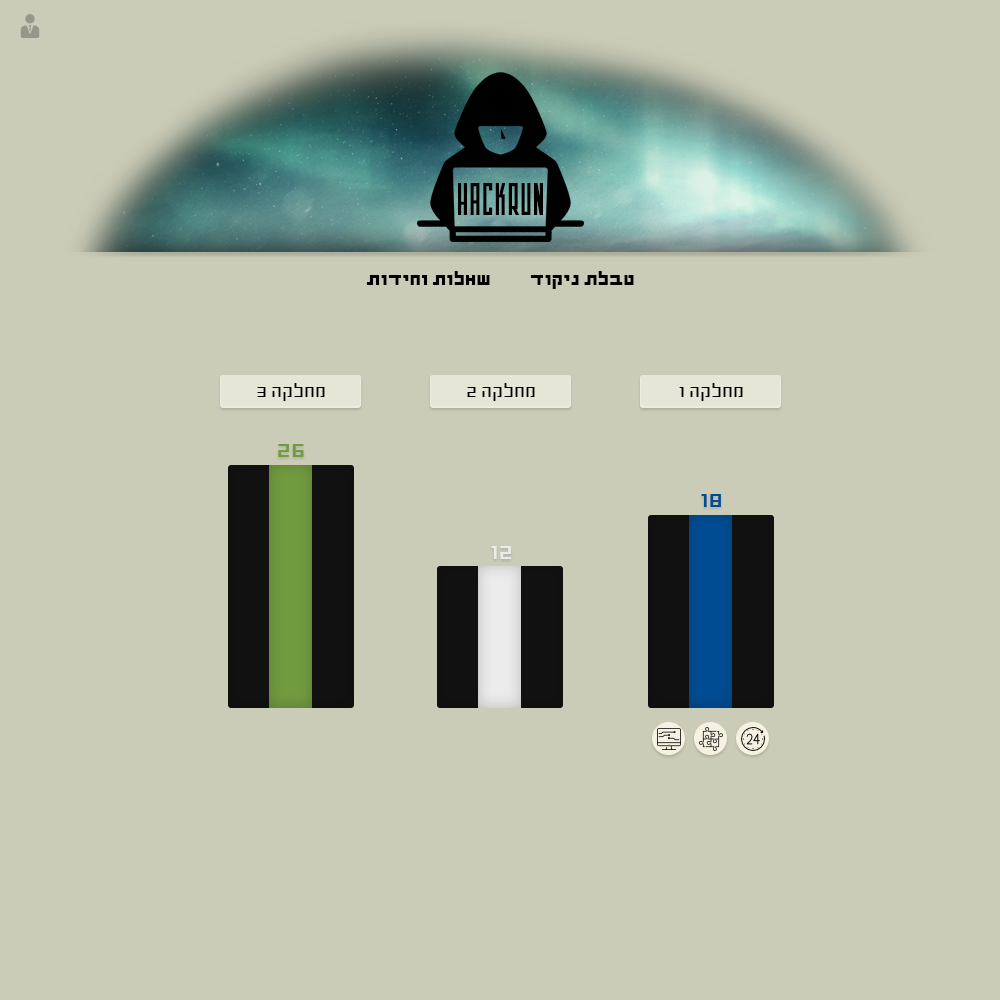
<style>
.page{position:relative;width:1000px;height:1000px;background:#cbccb7}
.page>*{position:absolute;margin:0}
.t1{font:43.9px "ALTROGUE";color:#000000}
.t2{font:20px "ShimshonBold";letter-spacing:-0.03em;color:#000000}
.t3{font:20px "Shimshon";color:#000000}
.t4{font:26px "Shimshon";color:#719b3f}
.t5{font:26px "Shimshon";color:#004c93}
.t6{font:26px "Shimshon";color:#ebebeb}
</style>
<div class="page">
<p class="t1" style="left:458px;top:183px;width:85px;height:32px">HACKRUN</p>
<p class="t2" style="left:366px;top:271px;width:124px;height:14px">שאלות וחידות</p>
<p class="t2" style="left:530px;top:271px;width:104px;height:18px">טבלת ניקוד</p>
<p class="t3" style="left:257px;top:383px;width:68px;height:18px">מחלקה 3</p>
<p class="t3" style="left:467px;top:383px;width:68px;height:18px">מחלקה 2</p>
<p class="t3" style="left:679px;top:383px;width:64px;height:18px">מחלקה 1</p>
<p class="t4" style="left:278px;top:444px;width:26px;height:13px">26</p>
<p class="t5" style="left:701px;top:494px;width:20px;height:13px">18</p>
<p class="t6" style="left:491px;top:546px;width:20px;height:13px">12</p>
</div>
